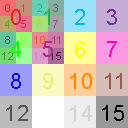
<style>
.page{position:relative;width:128px;height:128px}
.page>*{position:absolute;margin:0}
.t1{font:11px "ArialMT";letter-spacing:0.12em;color:#ed1b23}
.t2{font:11px "ArialMT";letter-spacing:0.12em;color:#74763b}
.t3{font:11px "ArialMT";letter-spacing:0.12em;color:#0eb5ae}
.t4{font:11px "ArialMT";letter-spacing:0.12em;color:#50657a}
.t5{font:22px "ArialMT";letter-spacing:0.12em;color:#ed1b23}
.t6{font:22px "ArialMT";letter-spacing:0.12em;color:#23b24b}
.t7{font:22px "ArialMT";letter-spacing:0.12em;color:#00b7f0}
.t8{font:22px "ArialMT";letter-spacing:0.12em;color:#6e3299}
.t9{font:11px "ArialMT";letter-spacing:0.12em;color:#66a40e}
.t10{font:11px "ArialMT";letter-spacing:0.12em;color:#d11d68}
.t11{font:11px "ArialMT";letter-spacing:0.12em;color:#a7e01e}
.t12{font:11px "ArialMT";letter-spacing:0.12em;color:#a3478d}
.t13{font:11px "ArialMT";letter-spacing:0.12em;color:#0b6995}
.t14{font:22px "ArialMT";letter-spacing:0.12em;color:#0cff00}
.t15{font:11px "ArialMT";letter-spacing:0.12em;color:#93f63f}
.t16{font:11px "ArialMT";color:#e55c3c}
.t17{font:22px "ArialMT";letter-spacing:0.12em;color:#be1e96}
.t18{font:11px "ArialMT";color:#a9426a}
.t19{font:22px "ArialMT";letter-spacing:0.12em;color:#ffff00}
.t20{font:22px "ArialMT";letter-spacing:0.12em;color:#f800b9}
.t21{font:11px "ArialMT";color:#389933}
.t22{font:11px "ArialMT";color:#cb8bbb}
.t23{font:11px "ArialMT";color:#4c0c3c}
.t24{font:22px "ArialMT";letter-spacing:0.12em;color:#0a05f8}
.t25{font:22px "ArialMT";letter-spacing:0.12em;color:#edf069}
.t26{font:22px "ArialMT";color:#ff8500}
.t27{font:22px "ArialMT";color:#9b5a4d}
.t28{font:22px "ArialMT";color:#555555}
.t29{font:22px "ArialMT";color:#d4d4d4}
.t30{font:22px "ArialMT";color:#000000}
</style>
<div class="page">
<p class="t1" style="left:5px;top:4px;width:5px;height:8px">0</p>
<p class="t2" style="left:21px;top:4px;width:3px;height:8px">1</p>
<p class="t3" style="left:37px;top:4px;width:5px;height:8px">2</p>
<p class="t4" style="left:53px;top:4px;width:5px;height:8px">3</p>
<p class="t5" style="left:11px;top:9px;width:10px;height:16px">0</p>
<p class="t6" style="left:44px;top:9px;width:6px;height:16px">1</p>
<p class="t7" style="left:75px;top:9px;width:10px;height:16px">2</p>
<p class="t8" style="left:107px;top:9px;width:10px;height:16px">3</p>
<p class="t9" style="left:5px;top:20px;width:5px;height:8px">4</p>
<p class="t10" style="left:21px;top:20px;width:5px;height:8px">5</p>
<p class="t11" style="left:37px;top:20px;width:5px;height:8px">6</p>
<p class="t12" style="left:53px;top:20px;width:5px;height:8px">7</p>
<p class="t13" style="left:5px;top:36px;width:5px;height:8px">8</p>
<p class="t14" style="left:11px;top:41px;width:10px;height:16px">4</p>
<p class="t15" style="left:21px;top:36px;width:5px;height:8px">9</p>
<p class="t16" style="left:34px;top:36px;width:11px;height:8px">10</p>
<p class="t17" style="left:43px;top:41px;width:10px;height:16px">5</p>
<p class="t18" style="left:52px;top:36px;width:8px;height:8px">11</p>
<p class="t19" style="left:75px;top:41px;width:10px;height:16px">6</p>
<p class="t20" style="left:107px;top:41px;width:10px;height:16px">7</p>
<p class="t21" style="left:2px;top:52px;width:11px;height:8px">12</p>
<p class="t22" style="left:34px;top:52px;width:11px;height:8px">14</p>
<p class="t23" style="left:50px;top:52px;width:11px;height:8px">15</p>
<p class="t24" style="left:11px;top:73px;width:10px;height:16px">8</p>
<p class="t25" style="left:43px;top:73px;width:10px;height:16px">9</p>
<p class="t26" style="left:70px;top:73px;width:22px;height:16px">10</p>
<p class="t27" style="left:105px;top:73px;width:17px;height:16px">11</p>
<p class="t28" style="left:6px;top:105px;width:22px;height:16px">12</p>
<p class="t29" style="left:70px;top:105px;width:22px;height:16px">14</p>
<p class="t30" style="left:102px;top:105px;width:22px;height:16px">15</p>
</div>
